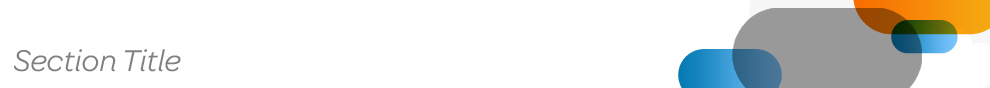
<style>
.page{position:relative;width:990px;height:88px;background:#ffffff}
.page>*{position:absolute;margin:0}
.t1{font:32px "Omnes_ATT-RegularItalic";letter-spacing:-0.03em;color:#808080}
</style>
<div class="page">
<p class="t1" style="left:14px;top:49px;width:167px;height:23px">Section Title</p>
</div>
